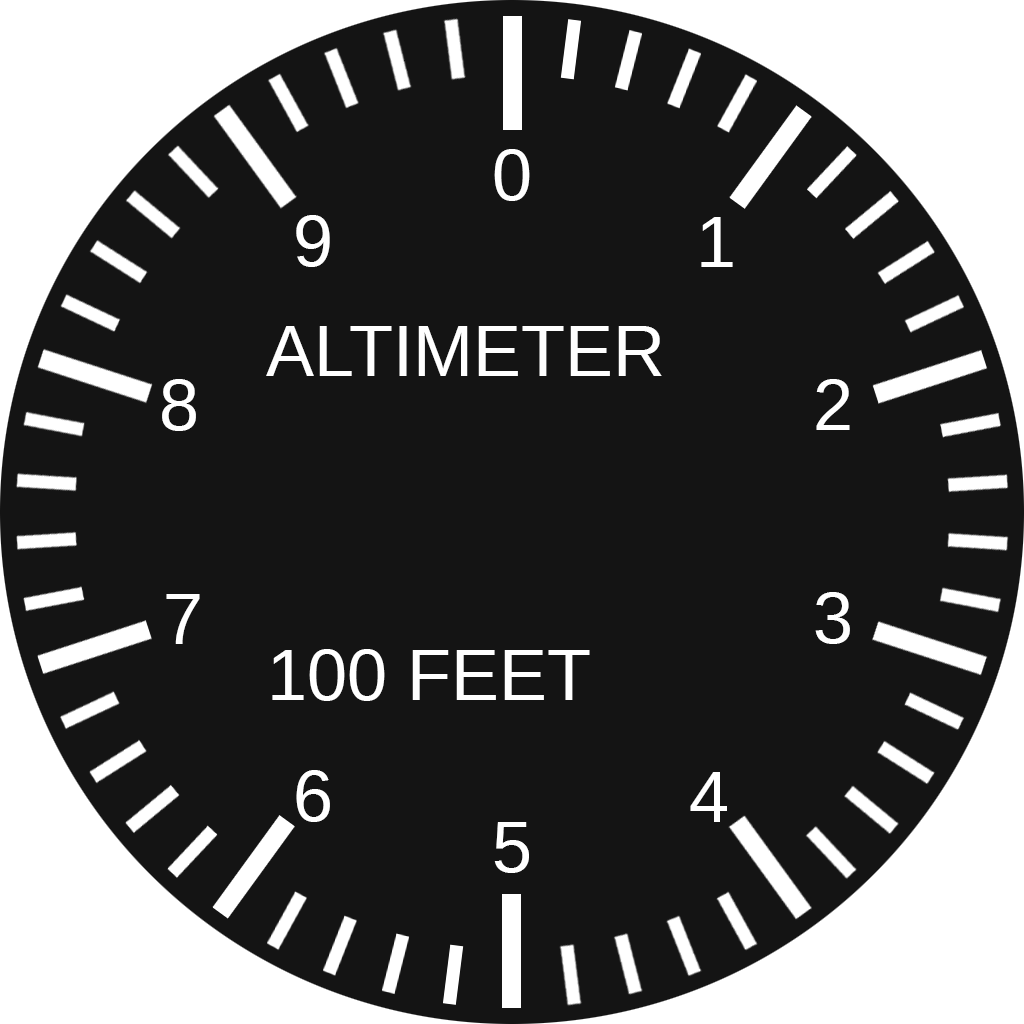
<style>
.page{position:relative;width:1024px;height:1024px;background:#141414}
.page>*{position:absolute;margin:0}
.t1{font:72px "LiberationSans";color:#ffffff}
</style>
<div class="page">
<p class="t1" style="left:494px;top:149px;width:36px;height:52px">0</p>
<p class="t1" style="left:296px;top:215px;width:34px;height:52px">9</p>
<p class="t1" style="left:701px;top:217px;width:32px;height:50px">1</p>
<p class="t1" style="left:266px;top:326px;width:396px;height:50px">ALTIMETER</p>
<p class="t1" style="left:162px;top:379px;width:34px;height:52px">8</p>
<p class="t1" style="left:816px;top:379px;width:34px;height:51px">2</p>
<p class="t1" style="left:815px;top:592px;width:35px;height:52px">3</p>
<p class="t1" style="left:166px;top:594px;width:34px;height:50px">7</p>
<p class="t1" style="left:272px;top:649px;width:318px;height:52px">100 FEET</p>
<p class="t1" style="left:296px;top:770px;width:34px;height:52px">6</p>
<p class="t1" style="left:690px;top:772px;width:37px;height:50px">4</p>
<p class="t1" style="left:494px;top:822px;width:35px;height:51px">5</p>
</div>
